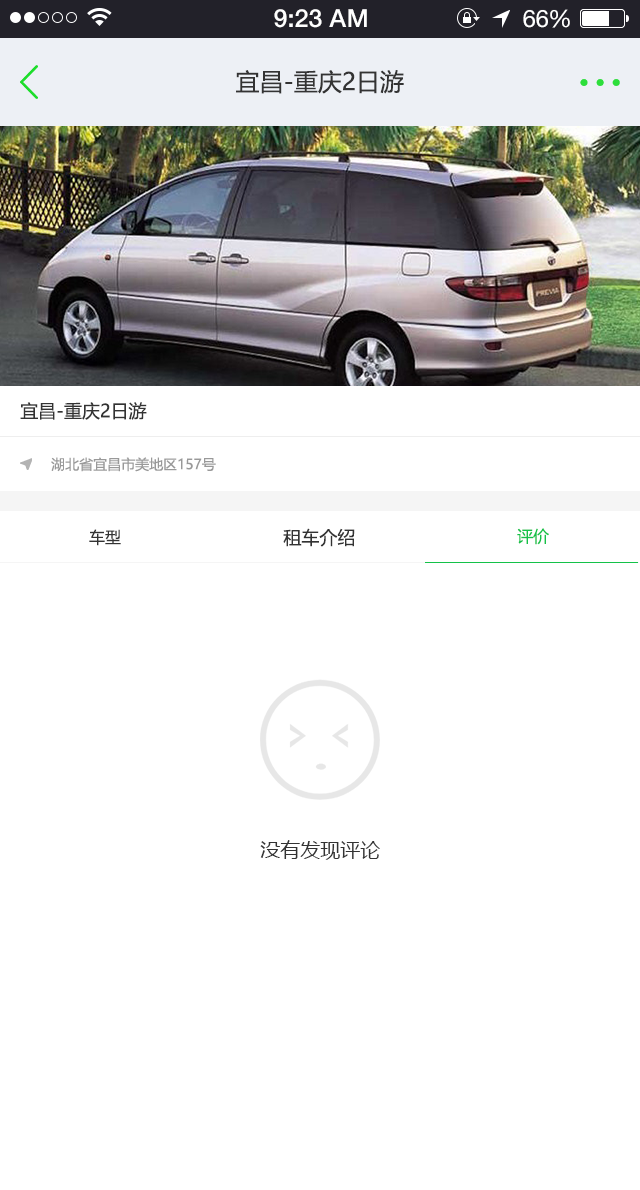
<style>
.page{position:relative;width:640px;height:1190px;background:#ffffff}
.page>*{position:absolute;margin:0}
.t1{font:25px "HelveticaNeue-Medium";color:#ffffff}
.t2{font:24px "HelveticaNeue";color:#ffffff}
.t3{font:24px "HelveticaNeue";letter-spacing:-0.02em;color:#ffffff}
.t4{font:24px "MicrosoftYaHei";color:#333333}
.t5{font:18px "MicrosoftYaHei";color:#333333}
.t6{font:14px "MicrosoftYaHei";color:#999999}
.t7{font:16px "MicrosoftYaHei";color:#333333}
.t8{font:16px "MicrosoftYaHei";color:#14c249}
.t9{font:20px "MicrosoftYaHei";color:#333333}
</style>
<div class="page">
<p class="t1" style="left:274px;top:9px;width:93px;height:19px">9:23 AM</p>
<p class="t2" style="left:523px;top:9px;width:47px;height:19px">6<span class="t3">6</span>%</p>
<p class="t4" style="left:236px;top:70px;width:168px;height:24px">宜昌-重庆2日游</p>
<p class="t5" style="left:20px;top:402px;width:127px;height:18px">宜昌-重庆2日游</p>
<p class="t6" style="left:51px;top:457px;width:165px;height:15px">湖北省宜昌市美地区157号</p>
<p class="t7" style="left:89px;top:529px;width:32px;height:17px">车型</p>
<p class="t5" style="left:283px;top:528px;width:72px;height:19px">租车介绍</p>
<p class="t8" style="left:517px;top:528px;width:32px;height:17px">评价</p>
<p class="t9" style="left:260px;top:840px;width:120px;height:20px">没有发现评论</p>
</div>
